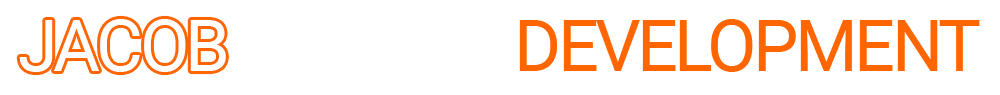
<style>
.page{position:relative;width:1000px;height:95px;background:#ffffff}
.page>*{position:absolute;margin:0}
.t1{font:72px "Roboto-Regular";letter-spacing:-0.05em;color:#ffffff}
.t2{font:72px "Roboto-Regular";letter-spacing:-0.05em;color:#ff6600}
</style>
<div class="page">
<p class="t1" style="left:19px;top:19px;width:207px;height:53px">JACOB</p>
<p class="t2" style="left:519px;top:19px;width:461px;height:53px">DEVELOPMENT</p>
</div>
